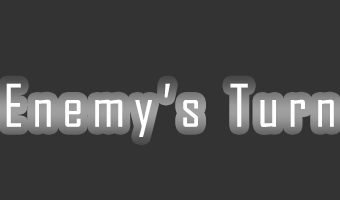
<style>
.page{position:relative;width:340px;height:200px;background:#333333}
.page>*{position:absolute;margin:0}
.t1{font:56px "AgencyFB-Reg";letter-spacing:0.16em;color:#ffffff}
</style>
<div class="page">
<p class="t1" style="left:6px;top:83px;width:328px;height:54px">Enemy’s Turn</p>
</div>
